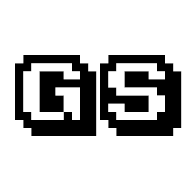
<style>
.page{position:relative;width:189px;height:189px;background:#ffffff}
.page>*{position:absolute;margin:0}
.t1{font:83.3px "KarmaticArcade";letter-spacing:0.14em;color:#000000}
</style>
<div class="page">
<p class="t1" style="left:15px;top:55px;width:167px;height:81px">gs</p>
</div>
